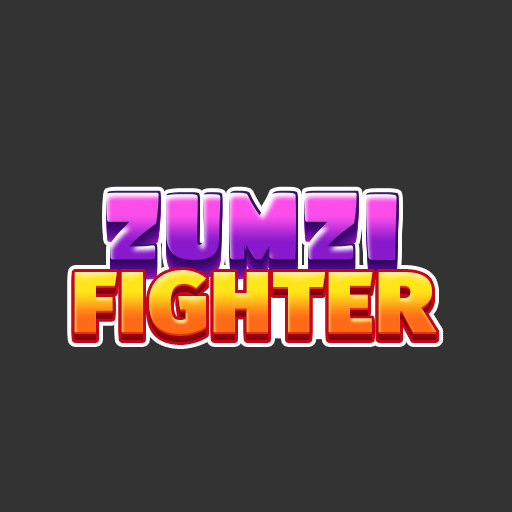
<style>
.page{position:relative;width:512px;height:512px;background:#333333}
.page>*{position:absolute;margin:0}
.t1{font:122.7px "Foo-Regular";letter-spacing:-0.02em;scale:1.05 1}
.t2{font:87.1px "FiraSans-Ultra";letter-spacing:0.025em;scale:1.05 1}
</style>
<div class="page">
<p class="t1" style="left:106px;top:190px;width:293px;height:71px">zumzı</p>
<p class="t2" style="left:74px;top:270px;width:363px;height:64px">FIGHTER</p>
</div>
